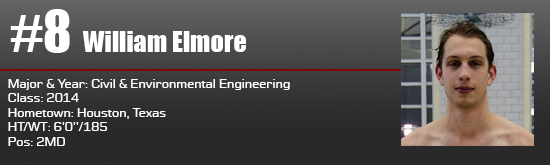
<style>
.page{position:relative;width:550px;height:165px}
.page>*{position:absolute;margin:0}
.t1{font:52.8px "Impact";color:#ffffff}
.t2{font:26.4px "Impact";color:#ffffff}
.t3{font:12px "Moire";color:#ffffff}
</style>
<div class="page">
<p class="t1" style="left:10px;top:9px;width:60px;height:44px">#8</p>
<p class="t2" style="left:82px;top:31px;width:164px;height:21px">William Elmore</p>
<p class="t3" style="left:8px;top:79px;width:282px;height:67px">Major &amp; Year: Civil &amp; Environmental Engineering<br>Class: 2014<br>Hometown: Houston, Texas<br>HT/WT: 6'0''/185<br>Pos: 2MD</p>
</div>
